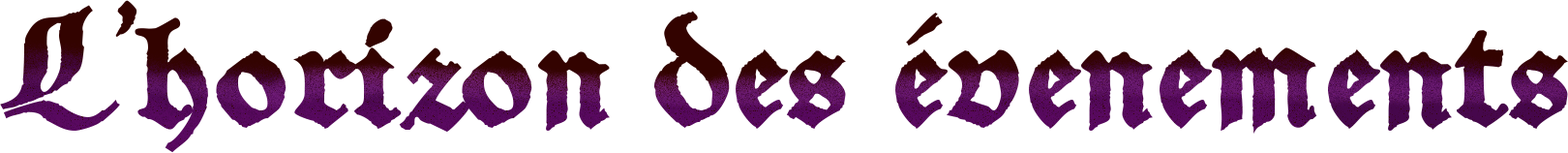
<style>
.page{position:relative;width:1568px;height:153px;background:#ffffff}
.page>*{position:absolute;margin:0}
.t1{font:197.8px "SchwarzKopfNew"}
</style>
<div class="page">
<p class="t1" style="left:0px;top:0px;width:1568px;height:153px">L’horizon des évenements</p>
</div>
